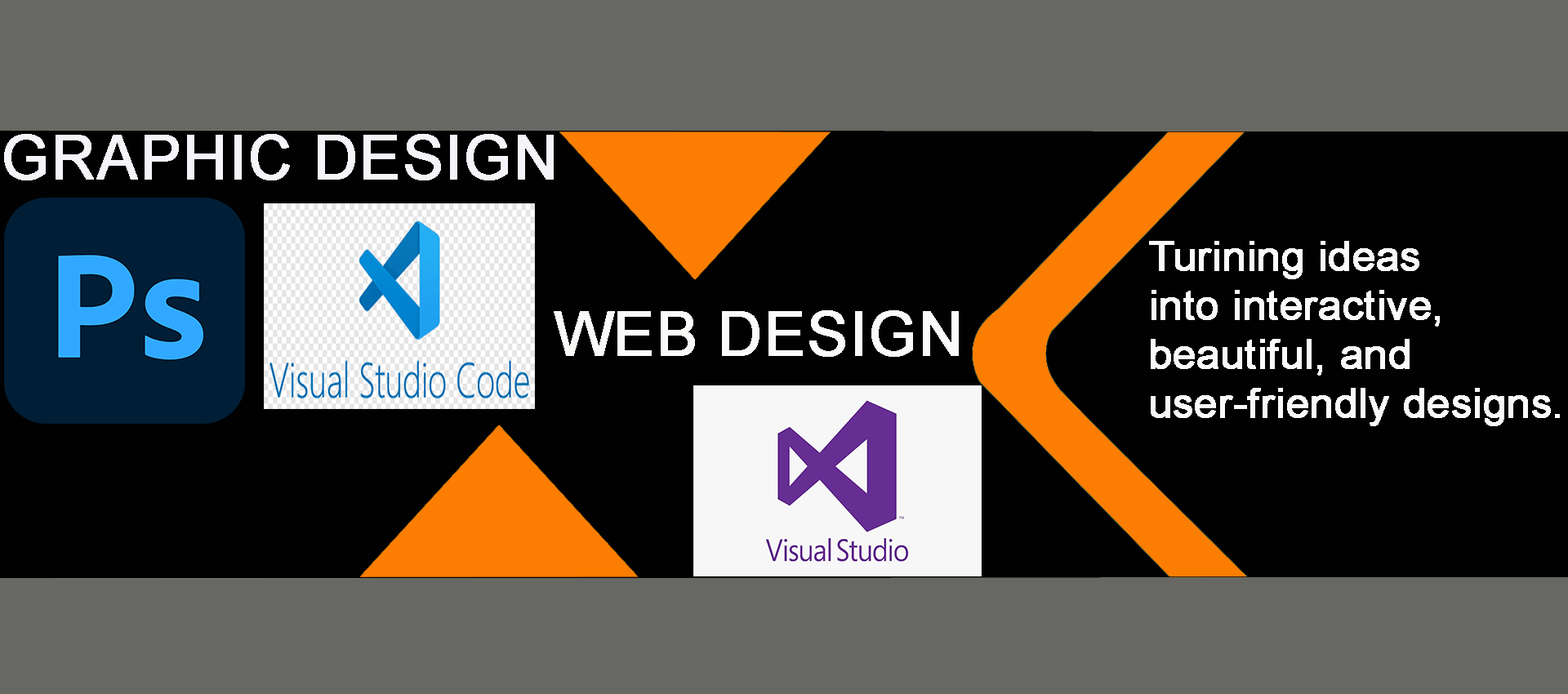
<style>
.page{position:relative;width:1568px;height:694px;background:#676763}
.page>*{position:absolute;margin:0}
.t1{font:61.2px "ArialMT";letter-spacing:0.005em;color:#f5f5f9;font-weight:bold}
.t2{font:40.8px "ArialMT";letter-spacing:0.005em;color:#fcfaf8;font-weight:bold}
.t3{font:61.2px "ArialMT";letter-spacing:0.005em;color:#fcfaf8;font-weight:bold}
</style>
<div class="page">
<p class="t1" style="left:4px;top:134px;width:550px;height:46px">GRAPHIC DESIGN</p>
<p class="t2" style="left:1149px;top:241px;width:411px;height:185px">Turining ideas<br>into interactive,<br>beautiful, and<br>user-friendly designs.</p>
<p class="t3" style="left:554px;top:310px;width:405px;height:47px">WEB DESIGN</p>
</div>
